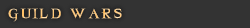
<style>
.page{position:relative;width:250px;height:28px;background:#333333}
.page>*{position:absolute;margin:0}
.t1{font:17.3px "VanHelsing-Regular";letter-spacing:0.12em;text-transform:uppercase}
</style>
<div class="page">
<p class="t1" style="left:8px;top:8px;width:114px;height:14px">guild wars</p>
</div>
